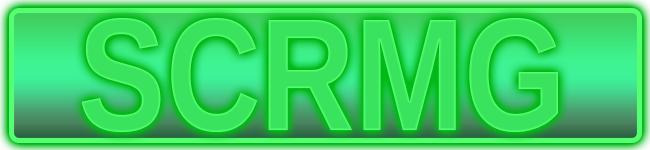
<style>
.page{position:relative;width:650px;height:150px}
.page>*{position:absolute;margin:0}
.t1{font:160px "LiberationSansNarrow-Bold";color:#3ae45e}
</style>
<div class="page">
<p class="t1" style="left:81px;top:18px;width:477px;height:114px">SCRMG</p>
</div>
